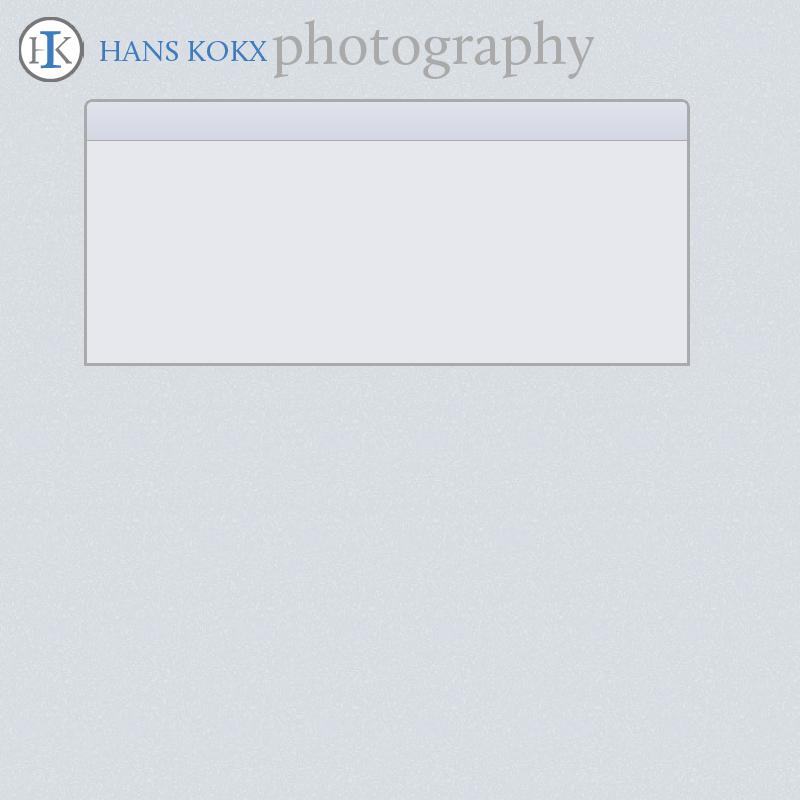
<style>
.page{position:relative;width:800px;height:800px;background:#e6e8ed}
.page>*{position:absolute;margin:0}
.t1{font:60px "Calluna-Regular";color:#aaaaaa}
.t2{font:30px "Calluna-Regular";color:#3c7cbf}
</style>
<div class="page">
<p class="t1" style="left:272px;top:19px;width:323px;height:60px">photography</p>
<p class="t2" style="left:100px;top:41px;width:168px;height:20px">HANS KOKX</p>
</div>
